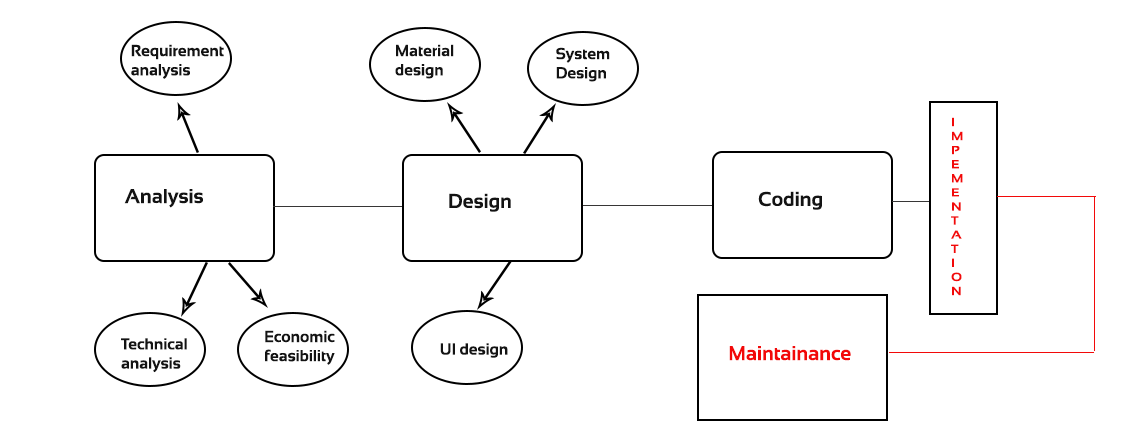
<style>
.page{position:relative;width:1130px;height:430px;background:#ffffff}
.page>*{position:absolute;margin:0}
.t1{font:16px "Sansation-Bold";color:#131313}
.t2{font:11.7px "Sansation-Bold";color:#f20909;scale:1.19 1}
.t3{font:20px "Sansation-Bold";color:#131313}
.t4{font:20px "Sansation-Bold";color:#f20909}
</style>
<div class="page">
<p class="t1" style="left:131px;top:44px;width:93px;height:35px">Requirement <br>analysis</p>
<p class="t1" style="left:395px;top:44px;width:59px;height:35px">Material<br>design</p>
<p class="t1" style="left:556px;top:47px;width:54px;height:35px">System <br>Design</p>
<p class="t2" style="left:951px;top:117px;width:12px;height:179px">I<br>M<br>P<br>E<br>M<br>E<br>N<br>T<br>A<br>T<br>I<br>O<br>N</p>
<p class="t3" style="left:124px;top:189px;width:79px;height:19px">Analysis</p>
<p class="t3" style="left:449px;top:193px;width:62px;height:19px">Design</p>
<p class="t3" style="left:758px;top:191px;width:64px;height:19px">Coding</p>
<p class="t1" style="left:121px;top:338px;width:66px;height:35px">Technical <br>analysis</p>
<p class="t1" style="left:265px;top:330px;width:70px;height:35px">Economic <br>feasibility</p>
<p class="t1" style="left:440px;top:343px;width:68px;height:15px">UI design</p>
<p class="t4" style="left:729px;top:346px;width:122px;height:15px">Maintainance</p>
</div>
